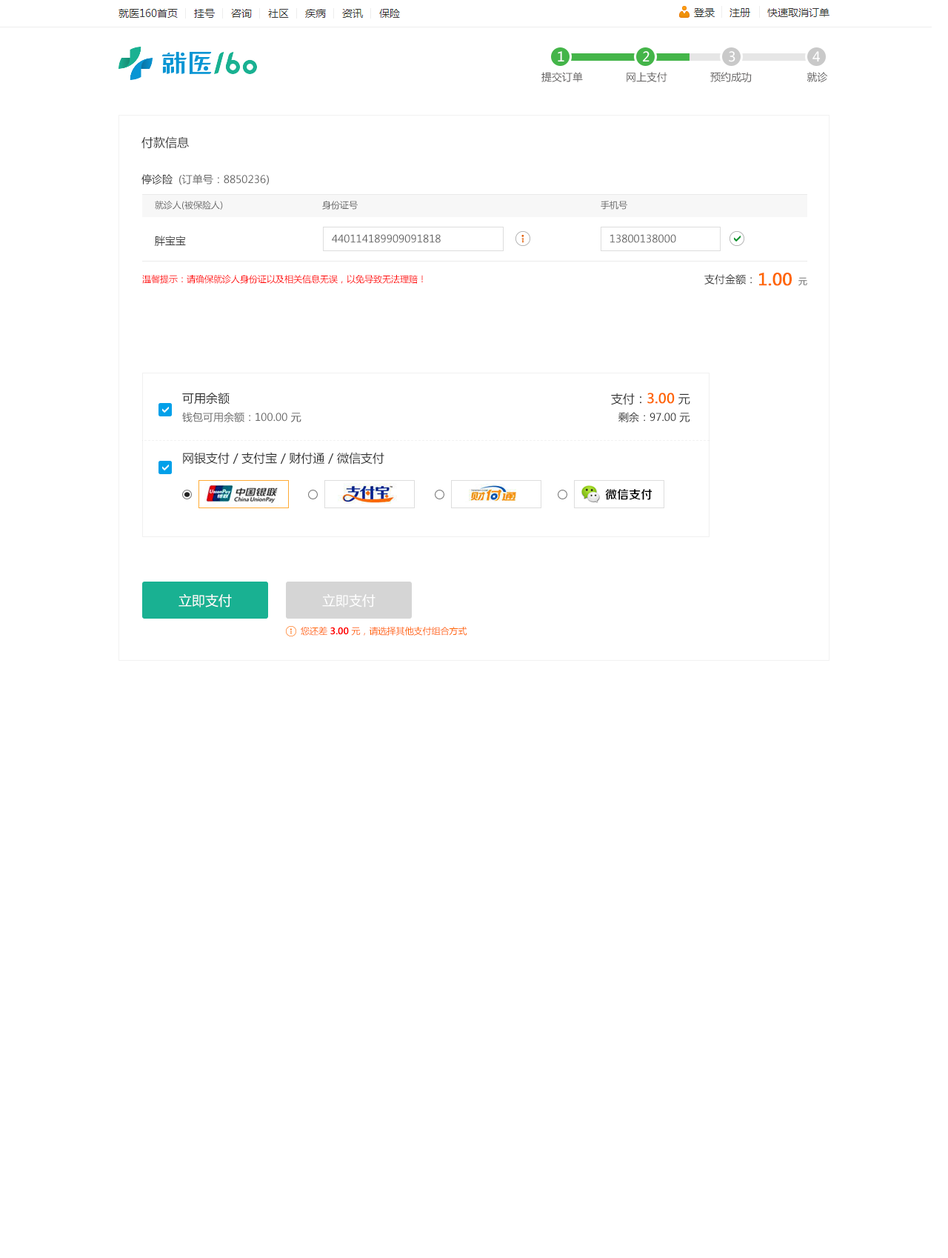
<style>
.page{position:relative;width:948px;height:1258px;background:#ffffff}
.page>*{position:absolute;margin:0}
.t1{font:13.3px "MicrosoftYaHei";color:#ffffff}
.t2{font:10.4px "MicrosoftYaHei";color:#636161}
.t3{font:11.9px "MicrosoftYaHei";color:#333333}
.t4{font:10.4px "MicrosoftYaHei";color:#333333}
.t5{font:10.4px "MicrosoftYaHei";color:#666666}
.t6{font:8.9px "MicrosoftYaHei";color:#666666}
.t7{font:8.9px "MicrosoftYaHei";color:#ff0000}
.t8{font:16.3px "MicrosoftYaHei";color:#ff6600;font-weight:bold}
.t9{font:13.3px "MicrosoftYaHei";color:#ff6600;font-weight:bold}
.t10{font:11.9px "FZZZHONGJW--GB1-0";color:#000000}
.t11{font:8.9px "MicrosoftYaHei";color:#ff6600}
.t12{font:8.9px "MicrosoftYaHei";color:#ff0000;font-weight:bold}
</style>
<div class="page">
<p class="t1" style="left:558px;top:51px;width:6px;height:10px">1</p>
<p class="t1" style="left:643px;top:51px;width:7px;height:10px">2</p>
<p class="t1" style="left:729px;top:51px;width:7px;height:11px">3</p>
<p class="t1" style="left:813px;top:51px;width:7px;height:10px">4</p>
<p class="t2" style="left:541px;top:72px;width:287px;height:10px">提交订单              网上支付              预约成功                  就诊</p>
<p class="t3" style="left:141px;top:136px;width:48px;height:13px">付款信息</p>
<p class="t4" style="left:141px;top:174px;width:32px;height:10px">停诊险</p>
<p class="t5" style="left:179px;top:174px;width:90px;height:11px">(订单号：8850236)</p>
<p class="t6" style="left:155px;top:200px;width:68px;height:10px">就诊人(被保险人)</p>
<p class="t6" style="left:322px;top:201px;width:36px;height:9px">身份证号</p>
<p class="t6" style="left:601px;top:201px;width:26px;height:9px">手机号</p>
<p class="t4" style="left:155px;top:236px;width:31px;height:10px">胖宝宝</p>
<p class="t5" style="left:332px;top:234px;width:109px;height:9px">440114189909091818</p>
<p class="t5" style="left:610px;top:234px;width:66px;height:9px">13800138000</p>
<p class="t7" style="left:142px;top:274px;width:281px;height:10px">温馨提示：请确保就诊人身份证以及相关信息无误，以免导致无法理赔！</p>
<p class="t4" style="left:704px;top:274px;width:48px;height:10px">支付金额：</p>
<p class="t8" style="left:759px;top:273px;width:33px;height:13px">1.00</p>
<p class="t6" style="left:798px;top:277px;width:9px;height:9px">元</p>
<p class="t3" style="left:182px;top:392px;width:48px;height:12px">可用余额</p>
<p class="t9" style="left:611px;top:393px;width:79px;height:12px"><span class="t3">支付：</span>3.00<span class="t3"> 元</span></p>
<p class="t5" style="left:182px;top:412px;width:119px;height:10px">钱包可用余额：100.00 元</p>
<p class="t4" style="left:618px;top:412px;width:72px;height:10px">剩余：97.00 元</p>
<p class="t3" style="left:183px;top:452px;width:201px;height:12px">网银支付 / 支付宝 / 财付通 / 微信支付</p>
<p class="t10" style="left:605px;top:489px;width:47px;height:11px">微信支付</p>
<p class="t1" style="left:179px;top:593px;width:53px;height:14px">立即支付</p>
<p class="t1" style="left:322px;top:593px;width:54px;height:14px">立即支付</p>
<p class="t11" style="left:301px;top:626px;width:166px;height:10px">您还差 <span class="t12">3.00</span> 元，请选择其他支付组合方式</p>
</div>
